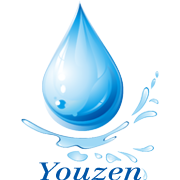
<style>
.page{position:relative;width:180px;height:180px;background:#ffffff}
.page>*{position:absolute;margin:0}
.t1{font:24.4px "CentennialLT-Italic";color:#0055a7;scale:1.3 1}
</style>
<div class="page">
<p class="t1" style="left:39px;top:162px;width:103px;height:19px">Youzen</p>
</div>
